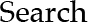
<style>
.page{position:relative;width:88px;height:22px;background:#ffffff}
.page>*{position:absolute;margin:0}
.t1{font:30px "Palatino-Roman";color:#020202}
</style>
<div class="page">
<p class="t1" style="left:0px;top:0px;width:88px;height:22px">Search</p>
</div>
